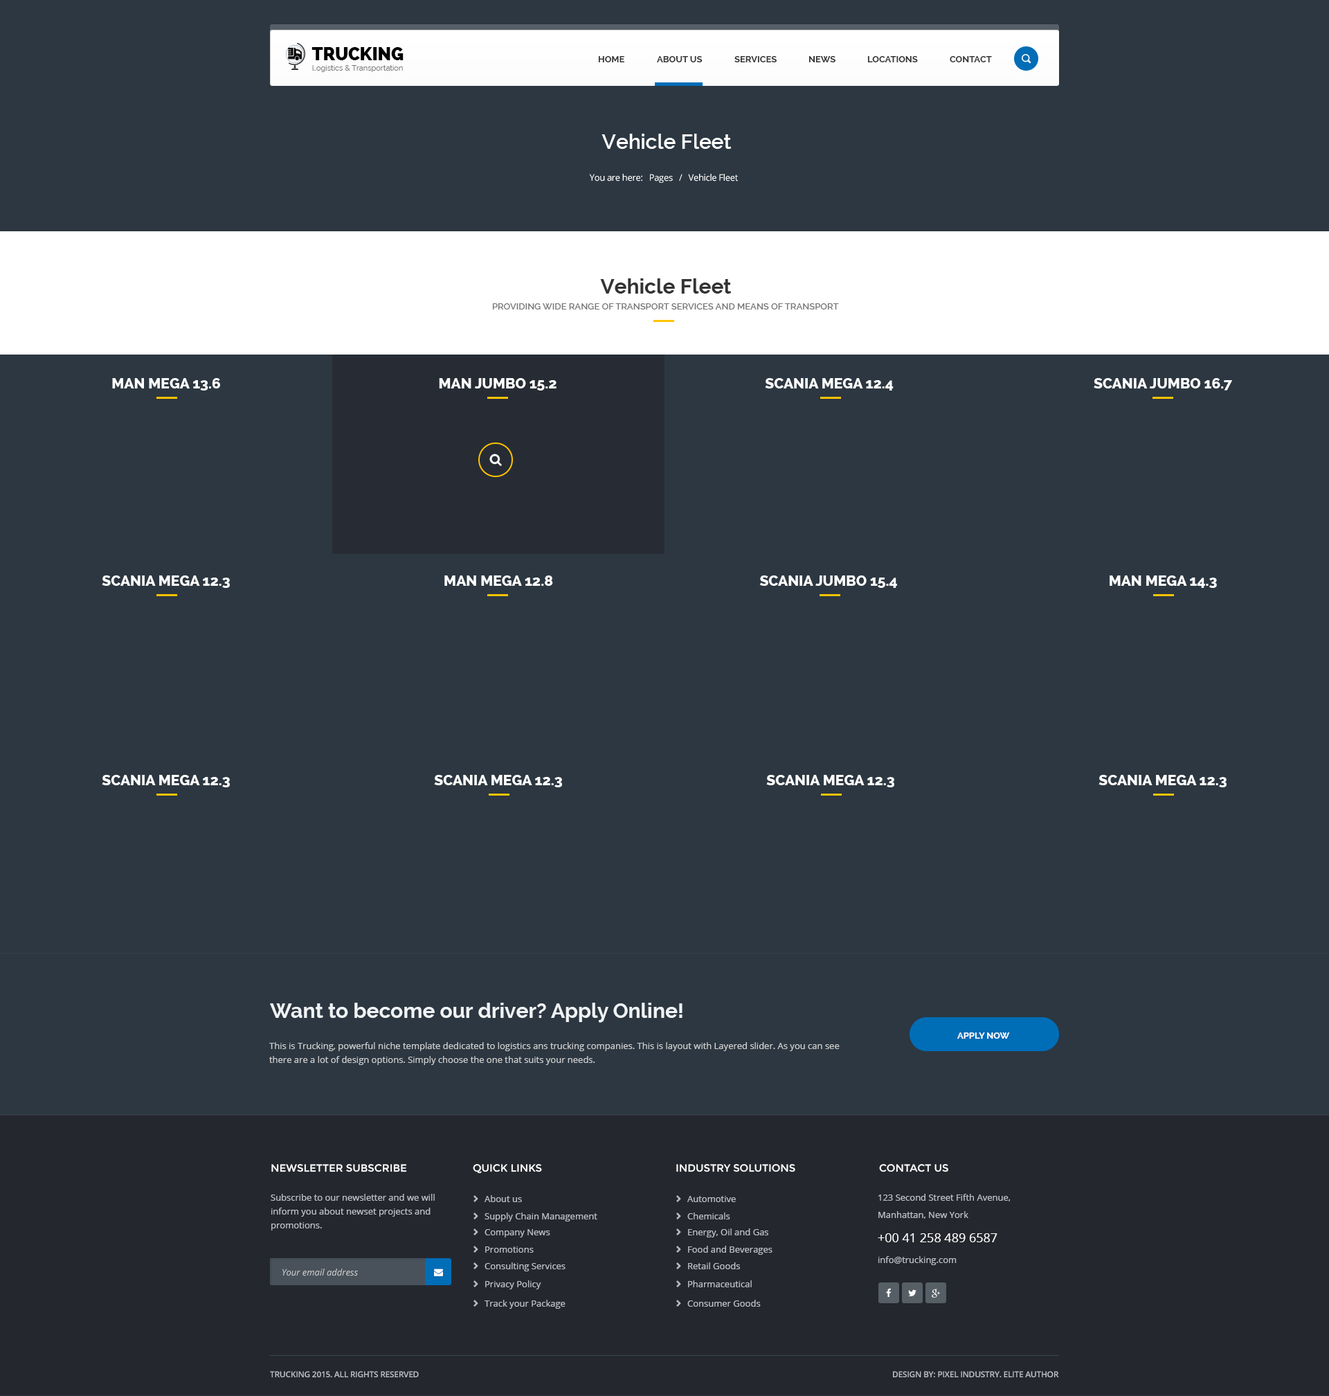
<style>
.page{position:relative;width:1329px;height:1396px;background:#2c3741}
.page>*{position:absolute;margin:0}
.t1{font:17.9px "Raleway-Heavy";color:#010101;text-transform:uppercase}
.t2{font:7.7px "Raleway";color:#777777}
.t3{font:9px "Raleway-Bold";color:#333333;text-transform:uppercase}
.t4{font:20.8px "Raleway-SemiBold";color:#ffffff}
.t5{font:9px "OpenSans";letter-spacing:-0.025em;color:#ffffff}
.t6{font:20.8px "Raleway-Bold";color:#333333}
.t7{font:9px "Raleway-SemiBold";color:#777777}
.t8{font:14.5px "Raleway-ExtraBold";color:#ffffff;text-transform:uppercase}
.t9{font:20.8px "Raleway-Bold";color:#f0f3f5}
.t10{font:9px "Raleway-Bold";color:#ffffff}
.t11{font:9px/13.8px "OpenSans";color:#cccccc}
.t12{font:10.4px "Montserrat-Regular";color:#ffffff;text-transform:uppercase}
.t13{font:9px/13.8px "OpenSans";color:#bcc0c4}
.t14{font:9px "OpenSans";color:#bcc0c4}
.t15{font:12.5px "OpenSans";color:#ffffff}
.t16{font:9px "OpenSans-Italic";color:#cccccc}
.t17{font:8.3px "OpenSans-Semibold";letter-spacing:-0.025em;color:#bcc0c4;text-transform:uppercase}
</style>
<div class="page">
<p class="t1" style="left:312px;top:47px;width:92px;height:13px">TRUCKING</p>
<p class="t2" style="left:312px;top:65px;width:91px;height:7px">Logistics &amp; Transportation</p>
<p class="t3" style="left:598px;top:56px;width:26px;height:6px">HOME</p>
<p class="t3" style="left:657px;top:56px;width:46px;height:6px">ABOUT US</p>
<p class="t3" style="left:735px;top:56px;width:42px;height:6px">SERVICES</p>
<p class="t3" style="left:809px;top:56px;width:27px;height:6px">NEWS</p>
<p class="t3" style="left:867px;top:56px;width:51px;height:6px">LOCATIONS</p>
<p class="t3" style="left:950px;top:56px;width:42px;height:6px">CONTACT</p>
<p class="t4" style="left:602px;top:134px;width:130px;height:15px">Vehicle Fleet</p>
<p class="t5" style="left:589px;top:174px;width:149px;height:9px">You are here:   Pages   /   Vehicle Fleet</p>
<p class="t6" style="left:600px;top:278px;width:132px;height:16px">Vehicle Fleet</p>
<p class="t7" style="left:492px;top:303px;width:347px;height:6px">PROVIDING WIDE RANGE OF TRANSPORT SERVICES AND MEANS OF TRANSPORT</p>
<p class="t8" style="left:112px;top:378px;width:108px;height:12px">MAN MEGA 13.6</p>
<p class="t8" style="left:439px;top:378px;width:118px;height:12px">MAN JUMBO 15.2</p>
<p class="t8" style="left:765px;top:378px;width:129px;height:12px">SCANIA MEGA 12.4</p>
<p class="t8" style="left:1094px;top:378px;width:138px;height:12px">SCANIA JUMBO 16.7</p>
<p class="t8" style="left:102px;top:575px;width:128px;height:13px">SCANIA MEGA 12.3</p>
<p class="t8" style="left:444px;top:575px;width:109px;height:11px">MAN MEGA 12.8</p>
<p class="t8" style="left:759px;top:575px;width:138px;height:13px">SCANIA JUMBO 15.4</p>
<p class="t8" style="left:1110px;top:575px;width:107px;height:13px">MAN MEGA 14.3</p>
<p class="t8" style="left:102px;top:775px;width:128px;height:12px">SCANIA MEGA 12.3</p>
<p class="t8" style="left:434px;top:775px;width:128px;height:12px">SCANIA MEGA 12.3</p>
<p class="t8" style="left:766px;top:775px;width:128px;height:12px">SCANIA MEGA 12.3</p>
<p class="t8" style="left:1099px;top:775px;width:128px;height:12px">SCANIA MEGA 12.3</p>
<p class="t9" style="left:270px;top:1002px;width:413px;height:21px">Want to become our driver? Apply Online!</p>
<p class="t10" style="left:957px;top:1032px;width:53px;height:6px">APPLY NOW</p>
<p class="t11" style="left:269px;top:1042px;width:571px;height:23px">This is Trucking, powerful niche template dedicated to logistics ans trucking companies. This is layout with Layered slider. As you can see there are a lot of design options. Simply choose the one that suits your needs.</p>
<p class="t12" style="left:271px;top:1164px;width:136px;height:8px">newsletter subscribe</p>
<p class="t12" style="left:473px;top:1164px;width:69px;height:9px">quick links</p>
<p class="t12" style="left:676px;top:1164px;width:119px;height:8px">INDUSTRY SOLUTIONS</p>
<p class="t12" style="left:879px;top:1164px;width:69px;height:8px">contact us</p>
<p class="t13" style="left:271px;top:1194px;width:164px;height:36px">Subscribe to our newsletter and we will inform you about newset projects and promotions.</p>
<p class="t13" style="left:879px;top:1194px;width:132px;height:24px">123 Second Street Fifth Avenue, <br>Manhattan, New York</p>
<p class="t14" style="left:485px;top:1195px;width:37px;height:7px">About us</p>
<p class="t14" style="left:687px;top:1196px;width:49px;height:6px">Automotive</p>
<p class="t14" style="left:485px;top:1212px;width:112px;height:9px">Supply Chain Management</p>
<p class="t14" style="left:687px;top:1212px;width:43px;height:7px">Chemicals</p>
<p class="t14" style="left:485px;top:1229px;width:65px;height:8px">Company News</p>
<p class="t14" style="left:688px;top:1228px;width:80px;height:9px">Energy, Oil and Gas</p>
<p class="t15" style="left:878px;top:1233px;width:120px;height:9px">+00 41 258 489 6587</p>
<p class="t14" style="left:485px;top:1246px;width:49px;height:6px">Promotions</p>
<p class="t14" style="left:688px;top:1245px;width:85px;height:9px">Food and Beverages</p>
<p class="t14" style="left:485px;top:1262px;width:81px;height:9px">Consulting Services</p>
<p class="t14" style="left:688px;top:1262px;width:52px;height:7px">Retail Goods</p>
<p class="t14" style="left:879px;top:1256px;width:78px;height:9px">info@trucking.com</p>
<p class="t16" style="left:282px;top:1268px;width:76px;height:8px">Your email address</p>
<p class="t14" style="left:485px;top:1280px;width:56px;height:9px">Privacy Policy</p>
<p class="t14" style="left:688px;top:1280px;width:64px;height:7px">Pharmaceutical</p>
<p class="t14" style="left:485px;top:1299px;width:81px;height:9px">Track your Package</p>
<p class="t14" style="left:687px;top:1299px;width:74px;height:7px">Consumer Goods</p>
<p class="t17" style="left:270px;top:1371px;width:149px;height:6px">TRUCKING 2015. ALL RIGHTS RESERVED</p>
<p class="t17" style="left:893px;top:1371px;width:166px;height:6px">DESIGN BY: PIXEL INDUSTRY. ELITE AUTHOR</p>
</div>
